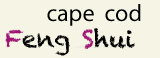
<style>
.page{position:relative;width:160px;height:58px;background:#f6f4e4}
.page>*{position:absolute;margin:0}
.t1{font:24px "MyriadPro-Regular";color:#000000}
.t2{font:24px "Chalkduster";color:#000000}
.t3{font:24px "Chalkduster";color:#9f1373}
</style>
<div class="page">
<p class="t1" style="left:47px;top:4px;width:94px;height:22px">cape  cod</p>
<p class="t2" style="left:5px;top:28px;width:130px;height:28px"><span class="t3">F</span>eng <span class="t3">S</span>hui</p>
</div>
